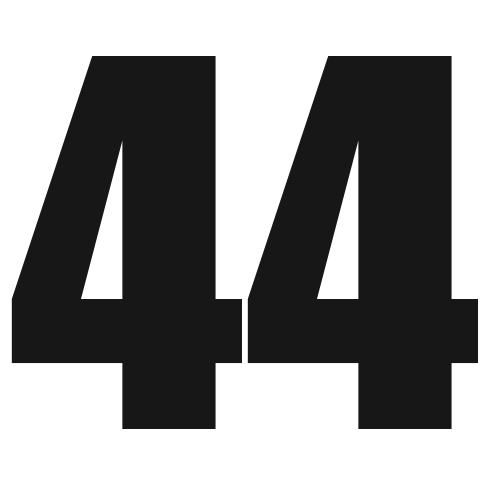
<style>
.page{position:relative;width:480px;height:480px;background:#171717}
.page>*{position:absolute;margin:0}
.t1{font:472.3px "Impact";color:#171717}
</style>
<div class="page">
<p class="t1" style="left:11px;top:56px;width:467px;height:373px">44</p>
</div>
